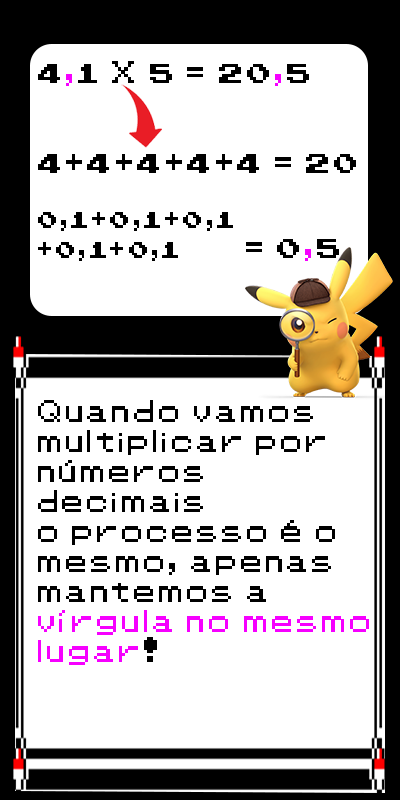
<style>
.page{position:relative;width:400px;height:800px;background:#ffffff}
.page>*{position:absolute;margin:0}
.t1{font:20.8px "Pokemon-Classic";color:#000000}
.t2{font:25px "Pokemon-Classic";color:#000000}
.t3{font:25px "Pokemon-Classic";color:#f600ff}
</style>
<div class="page">
<p class="t1" style="left:38px;top:61px;width:318px;height:200px"><span class="t2">4</span><span class="t3">,</span><span class="t2">1 X 5 = 20</span><span class="t3">,</span><span class="t2">5<br><br><br>4+4+4+4+4 = 20<br><br></span>0,1+0,1+0,1<br>+0,1+0,1<span class="t2">     = 0</span><span class="t3">,</span><span class="t2">5</span></p>
<p class="t2" style="left:38px;top:400px;width:331px;height:265px">Quando vamos<br>multiplicar por<br>números <br>decimais<br>o processo é o<br>mesmo, apenas<br>mantemos a<br><span class="t3">vírgula no mesmo<br>lugar</span>!</p>
</div>
